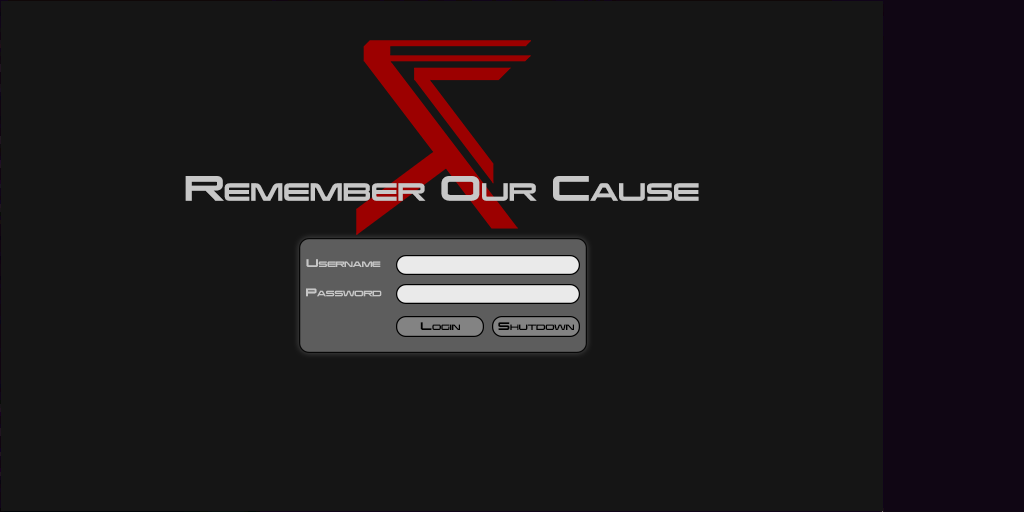
<style>
.page{position:relative;width:1024px;height:512px;background:#151515}
.page>*{position:absolute;margin:0}
.t1{font:31px "MassEffect123";color:#c7c7c7;font-variant:small-caps}
.t2{font:9.8px "MassEffect123";color:#c7c7c7;font-variant:small-caps}
.t3{font:9.8px "MassEffect123";color:#000000;font-variant:small-caps}
</style>
<div class="page">
<p class="t1" style="left:185px;top:176px;width:514px;height:25px">Remember Our Cause</p>
<p class="t2" style="left:306px;top:259px;width:75px;height:8px">Username</p>
<p class="t2" style="left:306px;top:288px;width:76px;height:9px">Password</p>
<p class="t3" style="left:420px;top:322px;width:40px;height:8px"><span class="t2"><br></span>Login</p>
<p class="t3" style="left:498px;top:322px;width:76px;height:8px">Shutdown</p>
</div>
